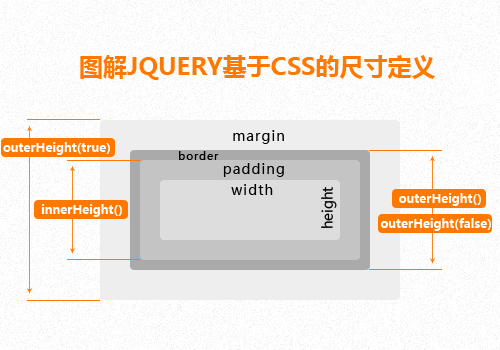
<style>
.page{position:relative;width:500px;height:350px;background:#ffffff}
.page>*{position:absolute;margin:0}
.t1{font:24px "MicrosoftYaHei-Bold";color:#ff7800}
.t2{font:14px "MicrosoftYaHei";letter-spacing:0.075em;color:#000000}
.t3{font:12px "MicrosoftYaHei-Bold";color:#ffffff}
.t4{font:11px "MicrosoftYaHei";letter-spacing:0.075em;color:#000000}
.t5{font:14px "MicrosoftYaHei";color:#000000}
</style>
<div class="page">
<p class="t1" style="left:80px;top:55px;width:356px;height:25px">图解JQUERY基于CSS的尺寸定义</p>
<p class="t2" style="left:233px;top:130px;width:51px;height:14px">margin</p>
<p class="t3" style="left:3px;top:142px;width:107px;height:13px">outerHeight(true)</p>
<p class="t4" style="left:179px;top:151px;width:40px;height:9px">border</p>
<p class="t2" style="left:223px;top:163px;width:61px;height:14px">padding</p>
<p class="t2" style="left:231px;top:184px;width:42px;height:11px">width</p>
<p class="t5" style="left:321px;top:187px;width:16px;height:41px;rotate:-90deg">height</p>
<p class="t3" style="left:399px;top:193px;width:82px;height:13px">outerHeight()</p>
<p class="t3" style="left:41px;top:204px;width:81px;height:13px">innerHeight()</p>
<p class="t3" style="left:380px;top:218px;width:111px;height:13px">outerHeight(false)</p>
</div>
